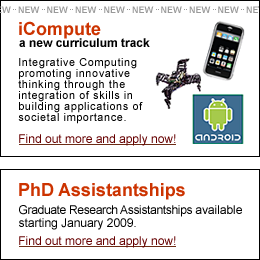
<style>
.page{position:relative;width:260px;height:260px;background:#ffffff}
.page>*{position:absolute;margin:0}
.t1{font:18px "Arial-BoldMT";color:#cc3300}
.t2{font:12px "Arial-BoldMT";color:#000000}
.t3{font:11px/11px "ArialMT";letter-spacing:0.05em;color:#000000}
.t4{font:12px "ArialMT";color:#660000}
.t5{font:12px/13px "ArialMT";letter-spacing:-0.025em;color:#000000}
.t6{font:12px/13px "ArialMT";color:#000000}
</style>
<div class="page">
<p class="t1" style="left:19px;top:21px;width:82px;height:18px">iCompute</p>
<p class="t2" style="left:19px;top:38px;width:131px;height:9px">a new curriculum track</p>
<p class="t3" style="left:18px;top:58px;width:125px;height:66px">Integrative Computing <br>promoting innovative <br>thinking through the <br>integration of skills in <br>building applications of <br>societal importance.</p>
<p class="t4" style="left:19px;top:134px;width:157px;height:12px">Find out more and apply now!</p>
<p class="t1" style="left:19px;top:183px;width:166px;height:17px">PhD Assistantships</p>
<p class="t5" style="left:19px;top:205px;width:223px;height:25px">Graduate Research Assistantships <span class="t6">available<br>starting January 2009.</span></p>
<p class="t4" style="left:19px;top:236px;width:157px;height:12px">Find out more and apply now!</p>
</div>
